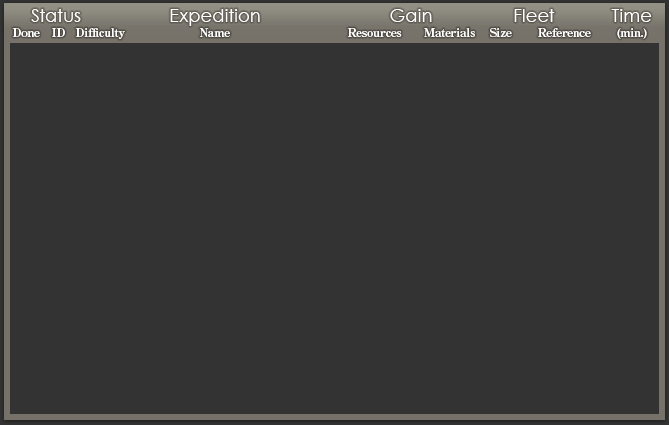
<style>
.page{position:relative;width:669px;height:425px;background:#333333}
.page>*{position:absolute;margin:0}
.t1{font:18px "CenturyGothic";color:#ffffff}
.t2{font:12px "RyuminPro-ExBold";letter-spacing:-0.04em;color:#ffffff}
</style>
<div class="page">
<p class="t1" style="left:31px;top:9px;width:50px;height:13px">Status</p>
<p class="t1" style="left:170px;top:9px;width:90px;height:17px">Expedition</p>
<p class="t1" style="left:390px;top:9px;width:42px;height:13px">Gain</p>
<p class="t1" style="left:514px;top:9px;width:41px;height:13px">Fleet</p>
<p class="t1" style="left:611px;top:9px;width:41px;height:13px">Time</p>
<p class="t2" style="left:12px;top:28px;width:28px;height:9px">Done</p>
<p class="t2" style="left:52px;top:28px;width:13px;height:9px">ID</p>
<p class="t2" style="left:75px;top:28px;width:50px;height:11px">Difficulty</p>
<p class="t2" style="left:199px;top:28px;width:31px;height:9px">Name</p>
<p class="t2" style="left:347px;top:28px;width:55px;height:10px">Resources</p>
<p class="t2" style="left:424px;top:28px;width:51px;height:10px">Materials</p>
<p class="t2" style="left:489px;top:28px;width:23px;height:9px">Size</p>
<p class="t2" style="left:538px;top:28px;width:53px;height:9px">Reference</p>
<p class="t2" style="left:617px;top:28px;width:30px;height:11px">(min.)</p>
</div>
